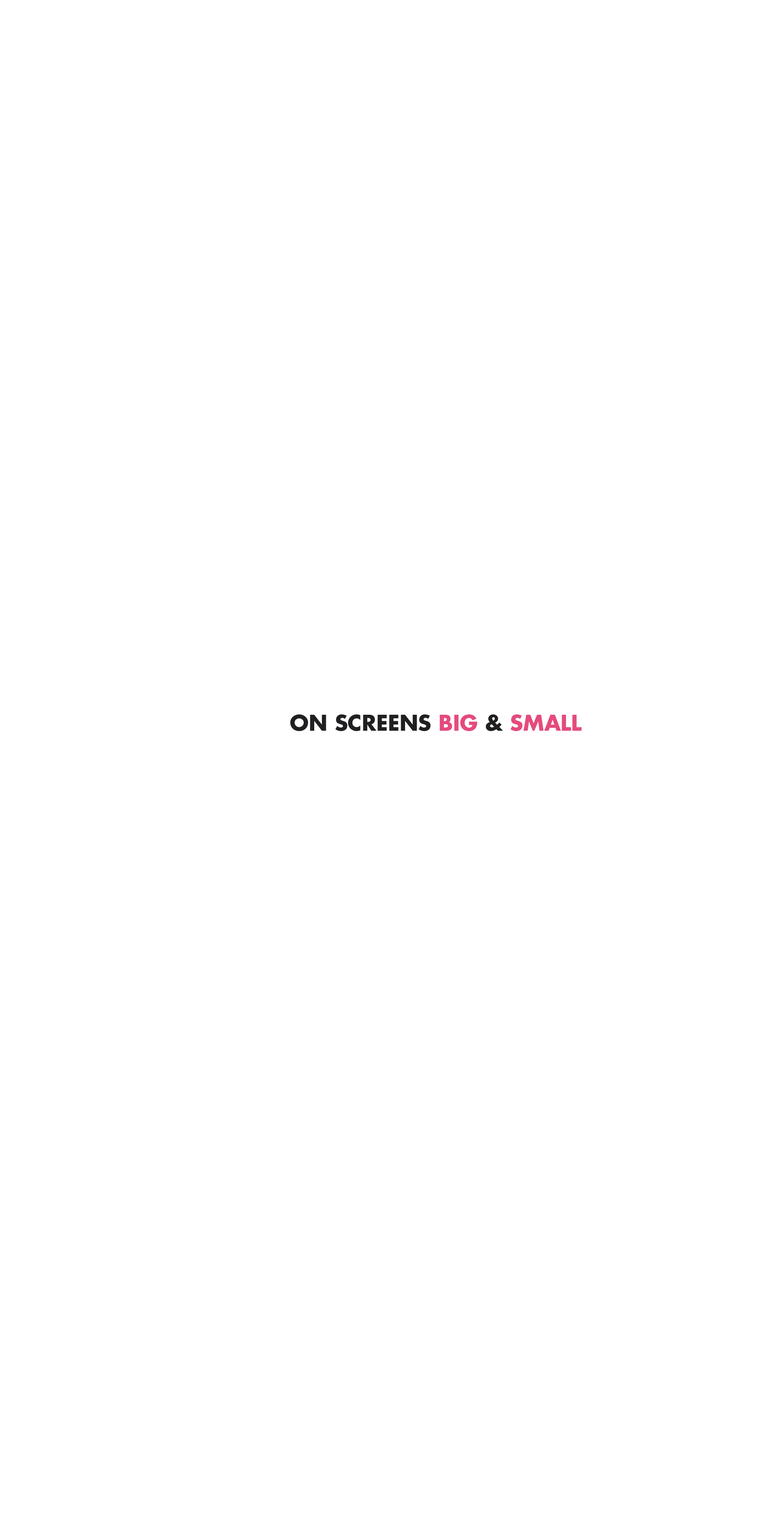
<style>
.page{position:relative;width:780px;height:1529px;background:#ffffff}
.page>*{position:absolute;margin:0}
.t1{font:21.2px "FuturaStd-Bold";color:#202022;text-transform:uppercase}
.t2{font:21.2px "FuturaStd-Bold";color:#e54b7c;text-transform:uppercase}
</style>
<div class="page">
<p class="t1" style="left:290px;top:714px;width:292px;height:17px">on screens <span class="t2">big</span> &amp; <span class="t2">small</span></p>
</div>
